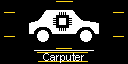
<style>
.page{position:relative;width:128px;height:64px;background:#000000}
.page>*{position:absolute;margin:0}
.t1{font:8px "PixelArial11";color:#ffffff}
</style>
<div class="page">
<p class="t1" style="left:43px;top:53px;width:41px;height:10px">Carputer</p>
</div>
